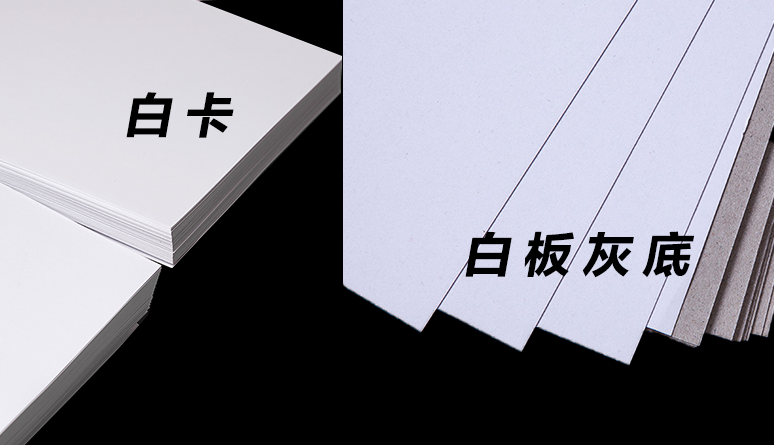
<style>
.page{position:relative;width:774px;height:445px;background:#000000}
.page>*{position:absolute;margin:0}
.t1{font:48.1px "FZLTDHK--GBK1-0";letter-spacing:0.24em;color:#000000;font-style:italic}
</style>
<div class="page">
<p class="t1" style="left:126px;top:92px;width:108px;height:46px">白卡</p>
<p class="t1" style="left:465px;top:231px;width:230px;height:47px">白板灰底</p>
</div>
